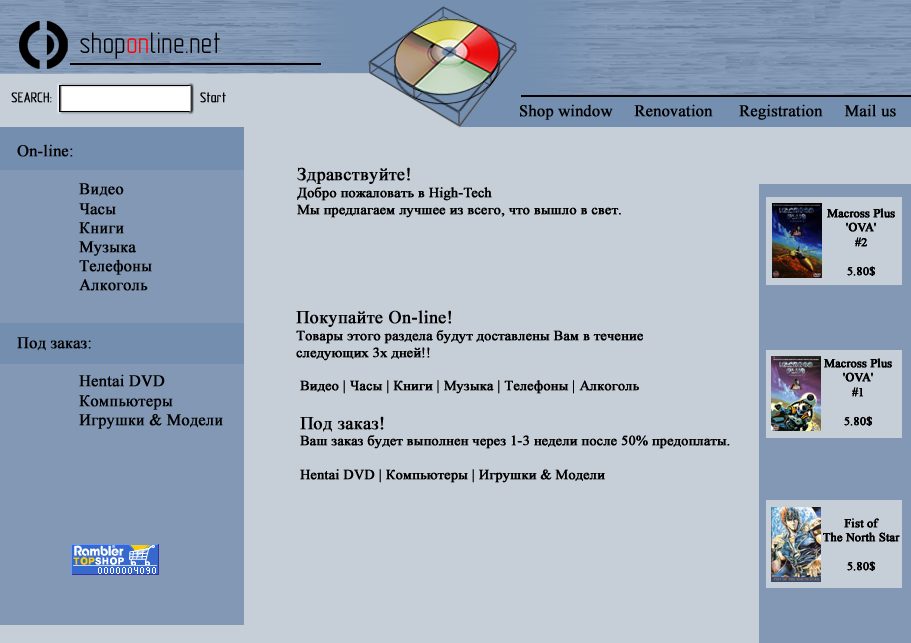
<style>
.page{position:relative;width:911px;height:643px;background:#c6ced8}
.page>*{position:absolute;margin:0}
.t1{font:30px "GOST-2.304-81typeA";color:#000000}
.t2{font:30px "GOST-2.304-81typeA";color:#ff0000}
.t3{font:14px "GOST-2.304-81typeA";color:#000000;font-weight:bold}
.t4{font:16px "TimesNewRomanPSMT";color:#000000;font-weight:bold}
.t5{font:14px "TimesNewRomanPSMT";color:#000000;font-weight:bold}
.t6{font:18px "TimesNewRomanPSMT";color:#000000;font-weight:bold}
.t7{font:12px "TimesNewRomanPSMT";color:#000000;font-weight:bold}
</style>
<div class="page">
<p class="t1" style="left:80px;top:32px;width:140px;height:27px">shop<span class="t2">on</span>line.net</p>
<p class="t3" style="left:11px;top:92px;width:215px;height:11px">SEARCH:                                 Start</p>
<p class="t4" style="left:520px;top:104px;width:376px;height:16px">Shop window     Renovation      Registration     Mail us</p>
<p class="t4" style="left:17px;top:144px;width:206px;height:285px">On-line:<br> <br>              Видео <br>              Часы <br>              Книги <br>              Музыка <br>              Телефоны <br>              Алкоголь <br><br>  <br>Под заказ:<br>  <br>              Hentai DVD <br>              Компьютеры <br>              Игрушки &amp; Модели</p>
<p class="t5" style="left:297px;top:167px;width:324px;height:51px"><span class="t6">Здравствуйте!<br></span>Добро пожаловать в High-Tech<br>Мы предлагаем лучшее из всего, что вышло в свет.</p>
<p class="t7" style="left:827px;top:208px;width:68px;height:68px;text-align:center">Macross Plus <br>'OVA' <br>#2<br><br>5.80$</p>
<p class="t5" style="left:296px;top:310px;width:434px;height:173px"><span class="t6">Покупайте On-line!<br></span>Товары этого раздела будут доставлены Вам в течение <br>следующих 3х дней!!<br><br> Видео | Часы | Книги | Музыка | Телефоны | Алкоголь <br><br> <span class="t6">Под заказ! <br></span> Ваш заказ будет выполнен через 1-3 недели после 50% предоплаты.<br><br> Hentai DVD | Компьютеры | Игрушки &amp; Модели</p>
<p class="t7" style="left:824px;top:358px;width:68px;height:68px;text-align:center">Macross Plus <br>'OVA' <br>#1<br><br>5.80$</p>
<p class="t7" style="left:823px;top:518px;width:77px;height:53px;text-align:center">Fist of <br>The North Star<br><br>5.80$</p>
</div>
